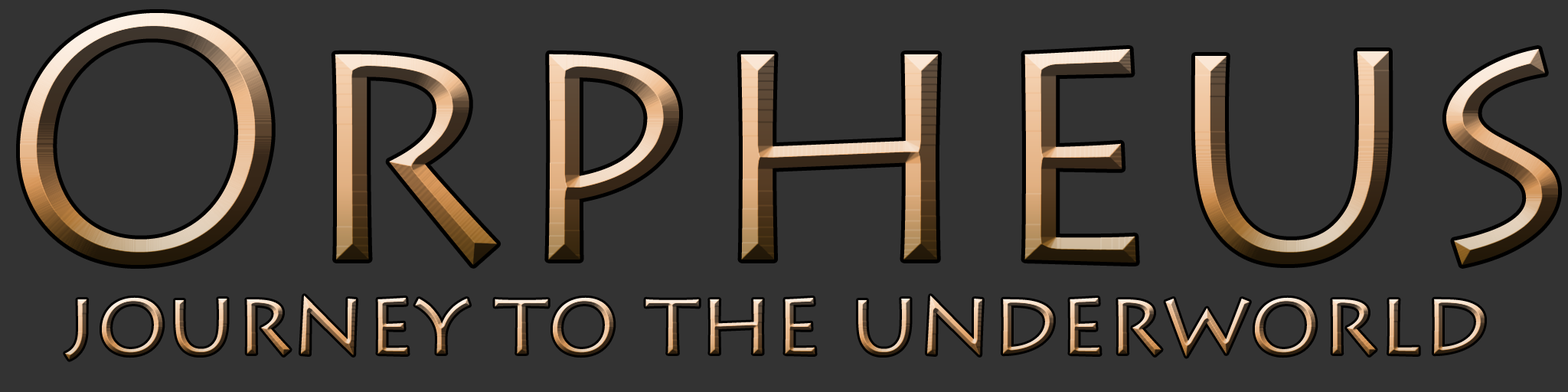
<style>
.page{position:relative;width:1568px;height:392px;background:#333333}
.page>*{position:absolute;margin:0}
.t1{font:344.5px "LithosPro-Regular"}
.t2{font:91.9px "LithosPro-Regular"}
</style>
<div class="page">
<p class="t1" style="left:20px;top:13px;width:1538px;height:252px">Orpheus</p>
<p class="t2" style="left:65px;top:296px;width:1420px;height:64px">journey to the underworld</p>
</div>
